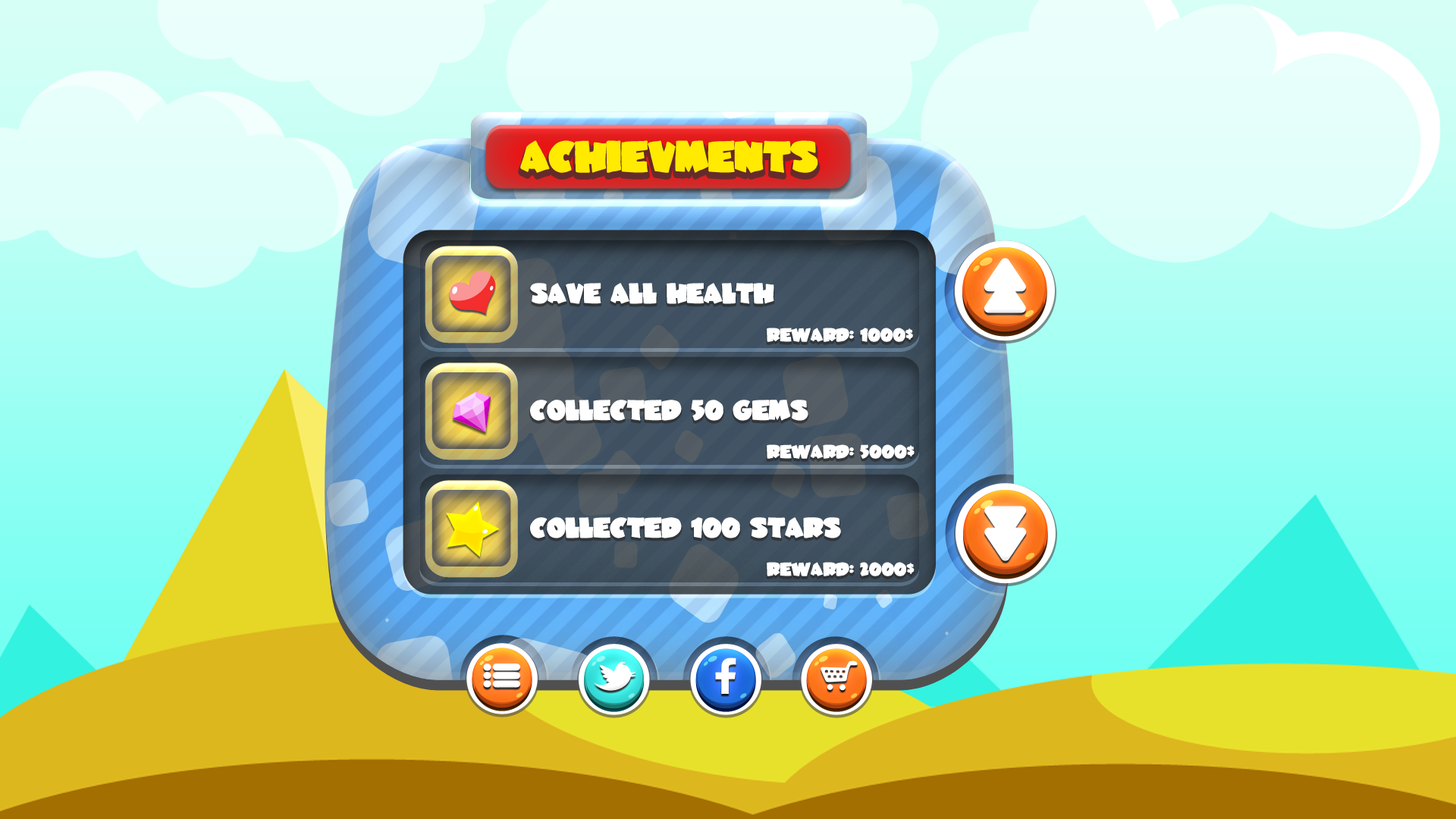
<style>
.page{position:relative;width:1456px;height:819px}
.page>*{position:absolute;margin:0}
.t1{font:31.9px "JuneBug";letter-spacing:-0.02em;color:#ffea00}
.t2{font:20.6px "JuneBug";letter-spacing:-0.02em;color:#ffffff}
.t3{font:13.7px "JuneBug";letter-spacing:-0.02em;color:#ffffff}
</style>
<div class="page">
<p class="t1" style="left:520px;top:140px;width:298px;height:33px">ACHIEVMENTS</p>
<p class="t2" style="left:530px;top:283px;width:244px;height:21px">SAVE ALL HEALTH</p>
<p class="t3" style="left:767px;top:328px;width:146px;height:14px">REWARD: 1000$</p>
<p class="t2" style="left:530px;top:400px;width:278px;height:21px">COLLECTED 50 GEMS</p>
<p class="t3" style="left:767px;top:444px;width:148px;height:15px">REWARD: 5000$</p>
<p class="t2" style="left:530px;top:517px;width:311px;height:21px">COLLECTED 100 STARS</p>
<p class="t3" style="left:767px;top:562px;width:148px;height:14px">REWARD: 2000$</p>
</div>
